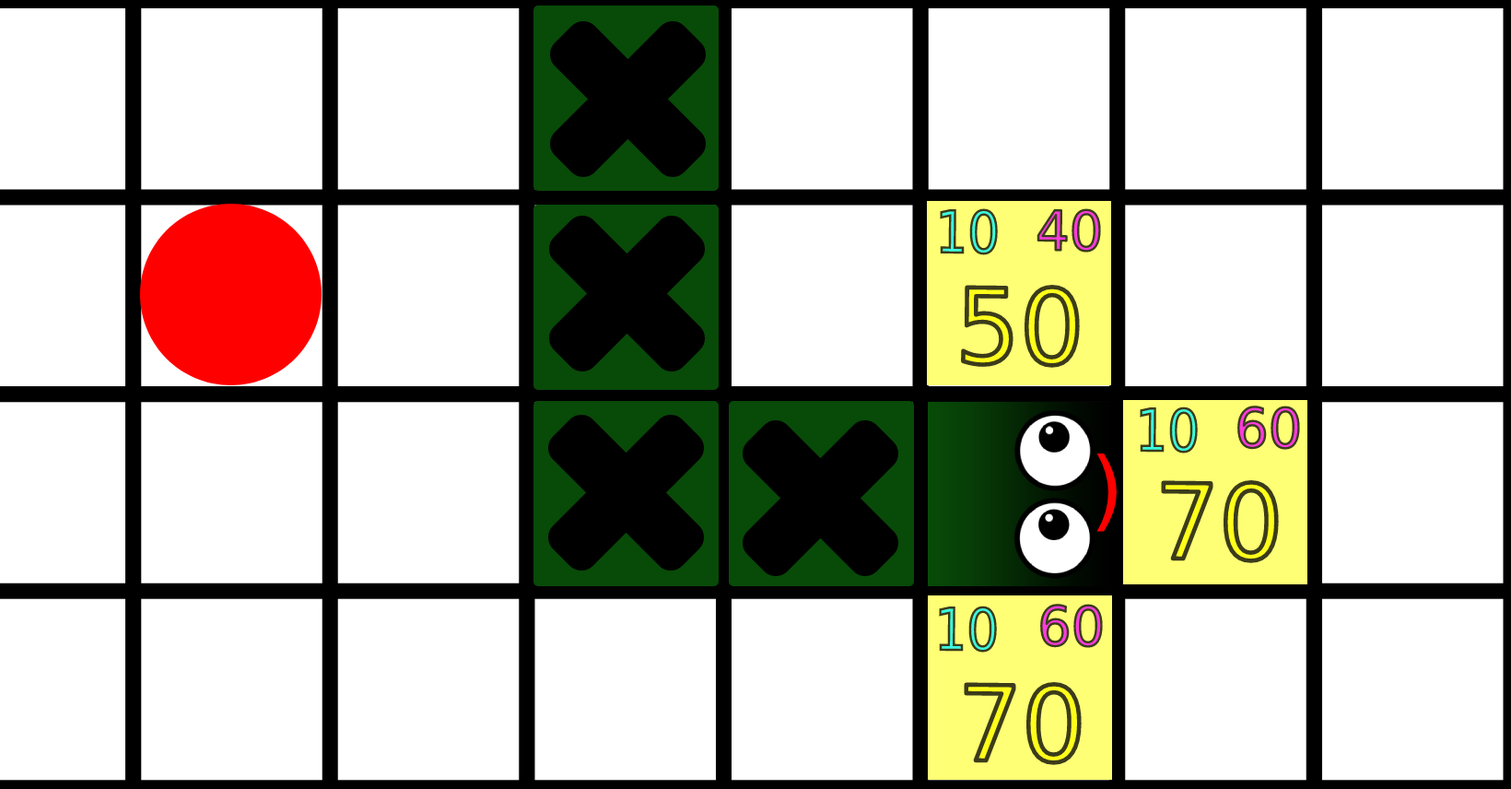
<style>
.page{position:relative;width:1511px;height:789px;background:#ffffff}
.page>*{position:absolute;margin:0}
.t1{font:57.8px "DejaVuSans";scale:0.87 1}
.t2{font:54.4px "DejaVuSans"}
.t3{font:103.6px "DejaVuSans"}
.t4{font:87.5px "DejaVuSans";color:#ff0000}
</style>
<div class="page">
<p class="t1" style="left:940px;top:208px;width:58px;height:47px;rotate:1deg">10</p>
<p class="t2" style="left:1037px;top:208px;width:64px;height:45px;rotate:1deg">40</p>
<p class="t3" style="left:960px;top:284px;width:121px;height:85px;rotate:1deg">50</p>
<p class="t1" style="left:1140px;top:406px;width:58px;height:47px;rotate:1deg">10</p>
<p class="t2" style="left:1238px;top:406px;width:62px;height:44px;rotate:1deg">60</p>
<p class="t4" style="left:1097px;top:453px;width:20px;height:79px">)</p>
<p class="t3" style="left:1160px;top:479px;width:120px;height:85px;rotate:1deg">70</p>
<p class="t1" style="left:939px;top:606px;width:58px;height:47px;rotate:1deg">10</p>
<p class="t2" style="left:1041px;top:604px;width:62px;height:44px;rotate:1deg">60</p>
<p class="t3" style="left:963px;top:681px;width:120px;height:85px;rotate:1deg">70</p>
</div>
